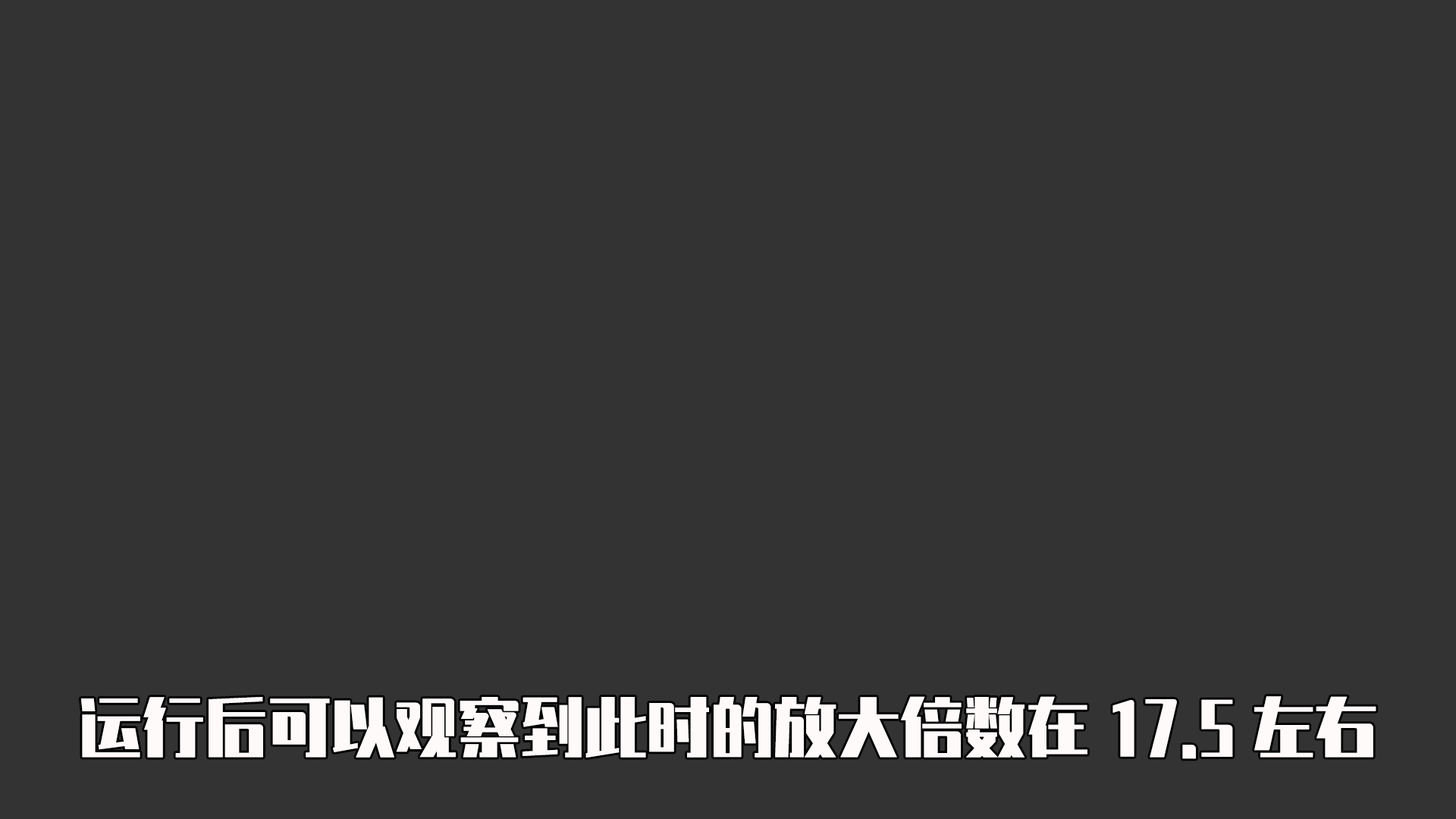
<style>
.page{position:relative;width:1456px;height:819px;background:#333333}
.page>*{position:absolute;margin:0}
.t1{font:63.2px "ZhenyanGB-Regular";color:#fefafa}
</style>
<div class="page">
<p class="t1" style="left:81px;top:696px;width:1295px;height:63px">运行后可以观察到此时的放大倍数在17.5左右</p>
</div>
